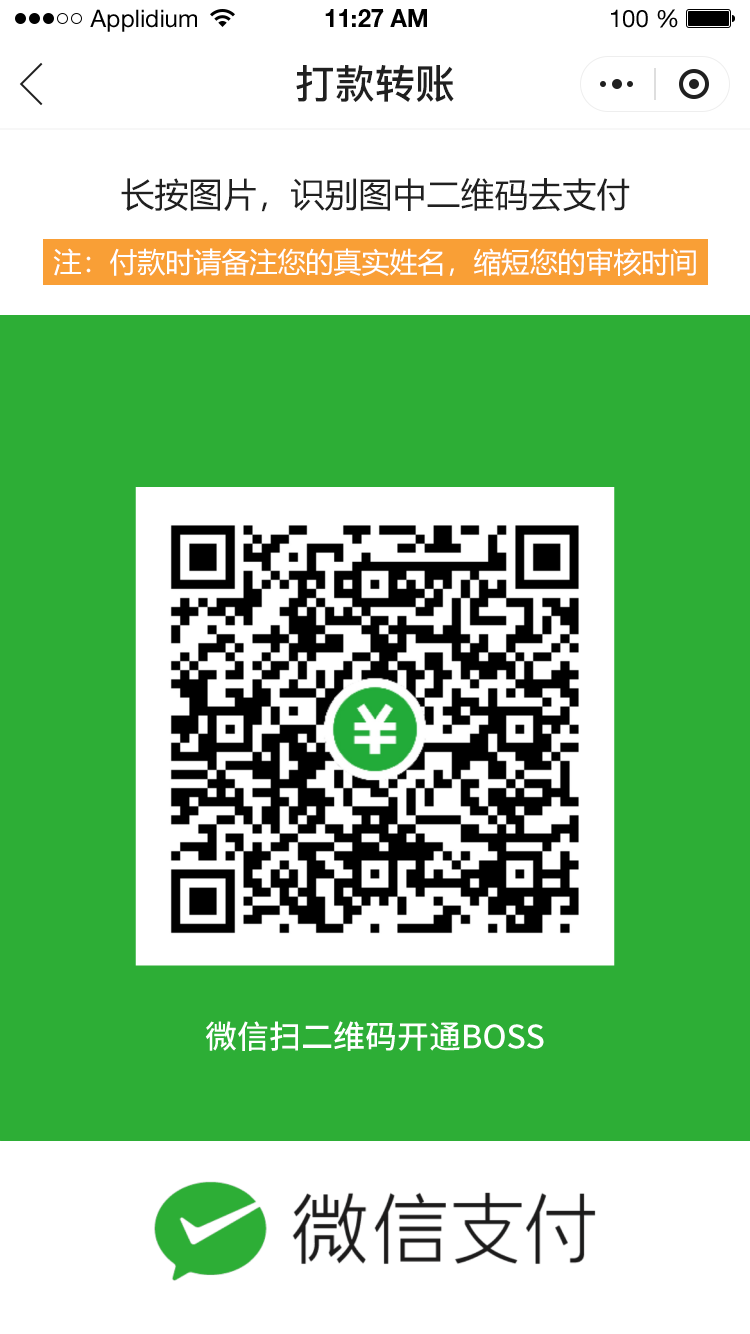
<style>
.page{position:relative;width:750px;height:1334px;background:#ffffff}
.page>*{position:absolute;margin:0}
.t1{font:24px "HelveticaNeueLTStd-Roman";color:#000000}
.t2{font:24px "HelveticaNeueLTStd-Bd";color:#000000}
.t3{font:40px "PingFang-SC-Bold";color:#202020;text-transform:uppercase}
.t4{font:34px "MicrosoftYaHei";color:#202020;text-transform:uppercase}
.t5{font:28px "MicrosoftYaHei";color:#ffffff;text-transform:uppercase}
</style>
<div class="page">
<p class="t1" style="left:90px;top:9px;width:107px;height:23px">Applidium</p>
<p class="t2" style="left:325px;top:9px;width:102px;height:18px">11:27 AM</p>
<p class="t1" style="left:611px;top:9px;width:67px;height:19px">100 %</p>
<p class="t3" style="left:296px;top:65px;width:158px;height:37px">打款转账</p>
<p class="t4" style="left:121px;top:178px;width:509px;height:34px">长按图片，识别图中二维码去支付</p>
<p class="t5" style="left:53px;top:248px;width:643px;height:28px">注：付款时请备注您的真实姓名，缩短您的审核时间</p>
</div>
